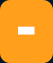
<style>
.page{position:relative;width:53px;height:63px;background:#ff9f1c}
.page>*{position:absolute;margin:0}
.t1{font:48px "Alibaba-PuHuiTi-H";letter-spacing:0.04em;color:#ffffff;font-weight:bold}
</style>
<div class="page">
<p class="t1" style="left:18px;top:26px;width:17px;height:9px">-</p>
</div>
